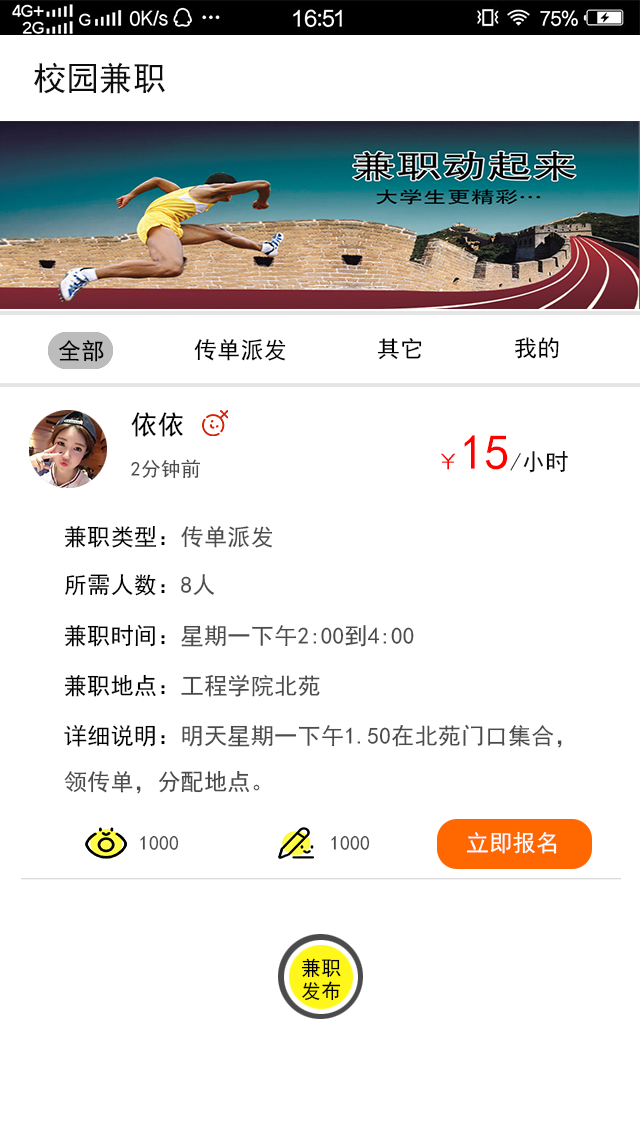
<style>
.page{position:relative;width:640px;height:1136px;background:#ffffff}
.page>*{position:absolute;margin:0}
.t1{font:33.3px "SimHei";letter-spacing:0.002em;color:#0e0e0e}
.t2{font:23.3px "SimHei";letter-spacing:0.002em;color:#010101}
.t3{font:23.3px "SimHei";letter-spacing:0.002em;color:#000000}
.t4{font:26.7px "SimHei";letter-spacing:0.002em;color:#010101}
.t5{font:23.3px "SimHei";letter-spacing:0.002em;color:#0d0d0d}
.t6{font:23.3px "SimHei";letter-spacing:0.002em;color:#ff0000}
.t7{font:50px "SimHei";letter-spacing:0.002em;color:#ff0000}
.t8{font:20px "SimHei";letter-spacing:0.002em;color:#4b4b4b}
.t9{font:23.3px "SimHei";letter-spacing:0.002em;color:#4b4b4b}
.t10{font:23.3px/46.5px "SimHei";letter-spacing:0.002em;color:#4b4b4b}
.t11{font:23.3px/46.5px "SimHei";letter-spacing:0.002em;color:#010101}
.t12{font:23.3px "SimHei";letter-spacing:0.002em;color:#ffffff}
.t13{font:12px "SimHei";letter-spacing:0.002em;color:#4b4b4b}
.t14{font:12px/23.1px "SimHei";letter-spacing:0.002em;color:#000000}
</style>
<div class="page">
<p class="t1" style="left:34px;top:62px;width:131px;height:32px">校园兼职</p>
<p class="t2" style="left:59px;top:340px;width:45px;height:22px">全部</p>
<p class="t3" style="left:194px;top:339px;width:92px;height:22px">传单派发</p>
<p class="t3" style="left:377px;top:338px;width:45px;height:22px">其它</p>
<p class="t3" style="left:515px;top:337px;width:44px;height:22px">我的</p>
<p class="t4" style="left:131px;top:412px;width:52px;height:25px">依依</p>
<p class="t5" style="left:441px;top:435px;width:127px;height:38px"><span class="t6">￥</span><span class="t7">15</span>/小时</p>
<p class="t8" style="left:131px;top:459px;width:70px;height:20px">2分钟前</p>
<p class="t3" style="left:64px;top:525px;width:209px;height:23px">兼职类型：<span class="t9">传单派发</span></p>
<p class="t3" style="left:65px;top:574px;width:150px;height:22px">所需人数：<span class="t9">8人</span></p>
<p class="t9" style="left:64px;top:624px;width:350px;height:23px"><span class="t3">兼职时间：</span>星期一下午2:00到4:00</p>
<p class="t9" style="left:64px;top:674px;width:256px;height:23px"><span class="t3">兼职地点：</span>工程学院北苑</p>
<p class="t10" style="left:64px;top:724px;width:498px;height:70px"><span class="t11">详细说明：</span>明天星期一下午1.50在北苑门口集合，<br>领传单，分配地点。</p>
<p class="t12" style="left:466px;top:831px;width:91px;height:23px">立即报名</p>
<p class="t13" style="left:140px;top:835px;width:39px;height:15px">1000</p>
<p class="t13" style="left:331px;top:835px;width:39px;height:15px">1000</p>
<p class="t14" style="left:301px;top:958px;width:40px;height:43px">兼职<br>发布</p>
</div>
